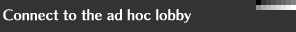
<style>
.page{position:relative;width:296px;height:32px;background:#333333}
.page>*{position:absolute;margin:0}
.t1{font:14px "ChiaroStd-B";color:#ffffff}
</style>
<div class="page">
<p class="t1" style="left:3px;top:9px;width:188px;height:14px">Connect to the ad hoc lobby</p>
</div>
